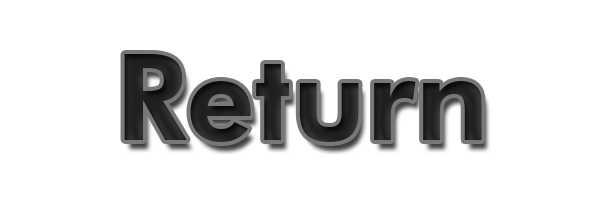
<style>
.page{position:relative;width:600px;height:200px;background:#ffffff}
.page>*{position:absolute;margin:0}
.t1{font:120px "FuturaBT-Heavy";color:#212121}
</style>
<div class="page">
<p class="t1" style="left:124px;top:54px;width:358px;height:88px">Return</p>
</div>
